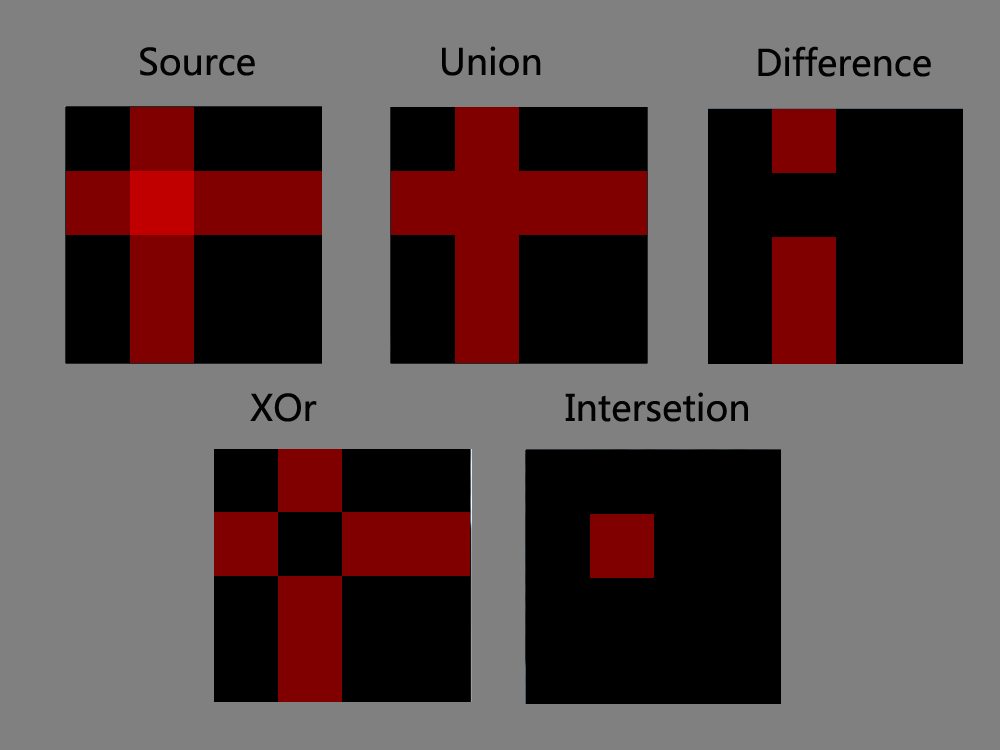
<style>
.page{position:relative;width:1000px;height:750px;background:#808080}
.page>*{position:absolute;margin:0}
.t1{font:36px "MicrosoftYaHei";color:#020202}
</style>
<div class="page">
<p class="t1" style="left:140px;top:47px;width:115px;height:29px">Source</p>
<p class="t1" style="left:442px;top:46px;width:99px;height:30px">Union</p>
<p class="t1" style="left:758px;top:46px;width:173px;height:31px">Difference</p>
<p class="t1" style="left:250px;top:393px;width:67px;height:29px">XOr</p>
<p class="t1" style="left:565px;top:392px;width:183px;height:30px">Intersetion</p>
</div>
